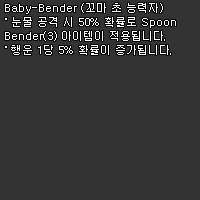
<style>
.page{position:relative;width:200px;height:200px;background:#333333}
.page>*{position:absolute;margin:0}
.t1{font:11px/14px "Dotum";color:#ffffff}
</style>
<div class="page">
<p class="t1" style="left:5px;top:3px;width:171px;height:52px">Baby-Bender (꼬마 초 능력자)<br>˚ 눈물 공격 시 50% 확률로 Spoon <br>Bender(3) 아이템이 적용됩니다.<br>˚ 행운 1당 5% 확률이 증가됩니다.</p>
</div>
